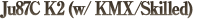
<style>
.page{position:relative;width:217px;height:19px;background:#ffffff}
.page>*{position:absolute;margin:0}
.t1{font:18px "RyuminPro-ExBold";letter-spacing:-0.08em;color:#4a3f32;font-weight:bold;scale:0.9 1}
</style>
<div class="page">
<p class="t1" style="left:0px;top:1px;width:193px;height:18px">Ju87C K2 (w/ KMX/Skilled)</p>
</div>
